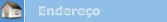
<style>
.page{position:relative;width:167px;height:22px;background:#8fbee8}
.page>*{position:absolute;margin:0}
.t1{font:12px "Verdana-Bold";color:#d2e2e8}
</style>
<div class="page">
<p class="t1" style="left:39px;top:6px;width:61px;height:12px">Endereço</p>
</div>
